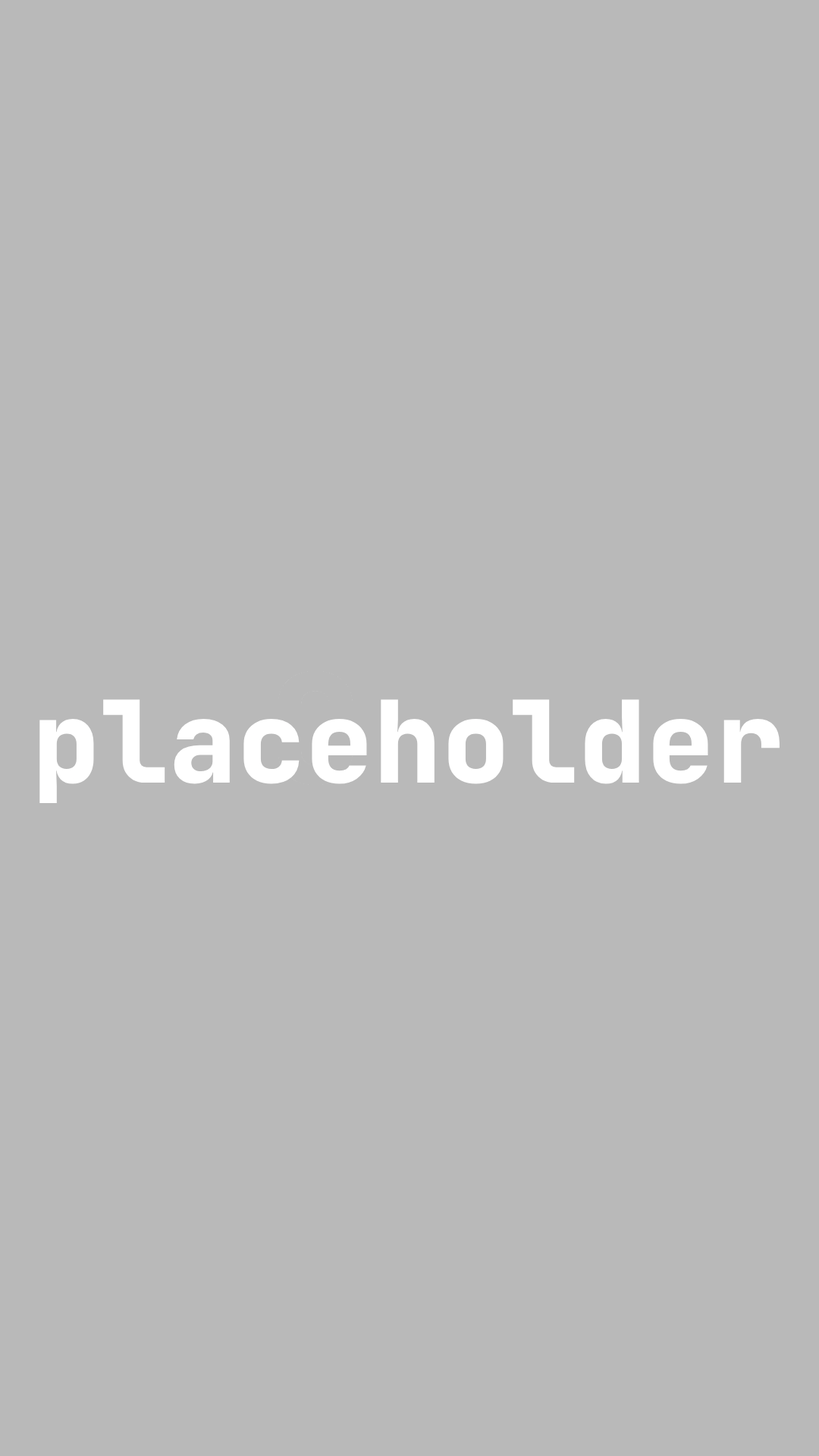
<style>
.page{position:relative;width:819px;height:1456px;background:#b9b9b9}
.page>*{position:absolute;margin:0}
.t1{font:113.7px "JetBrainsMono-ExtraBold";color:#ffffff}
</style>
<div class="page">
<p class="t1" style="left:39px;top:699px;width:741px;height:104px">placeholder</p>
</div>
